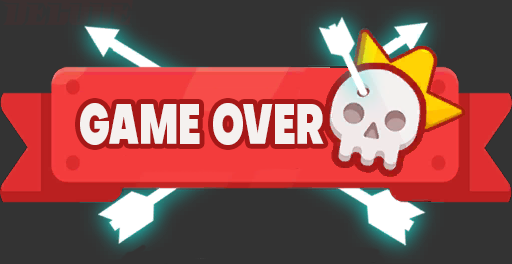
<style>
.page{position:relative;width:512px;height:264px;background:#333333}
.page>*{position:absolute;margin:0}
.t1{font:55.5px "Objectivity-Black";color:#f5f1ef;scale:0.66 1}
</style>
<div class="page">
<p class="t1" style="left:80px;top:103px;width:244px;height:42px">GAME OVER</p>
</div>
